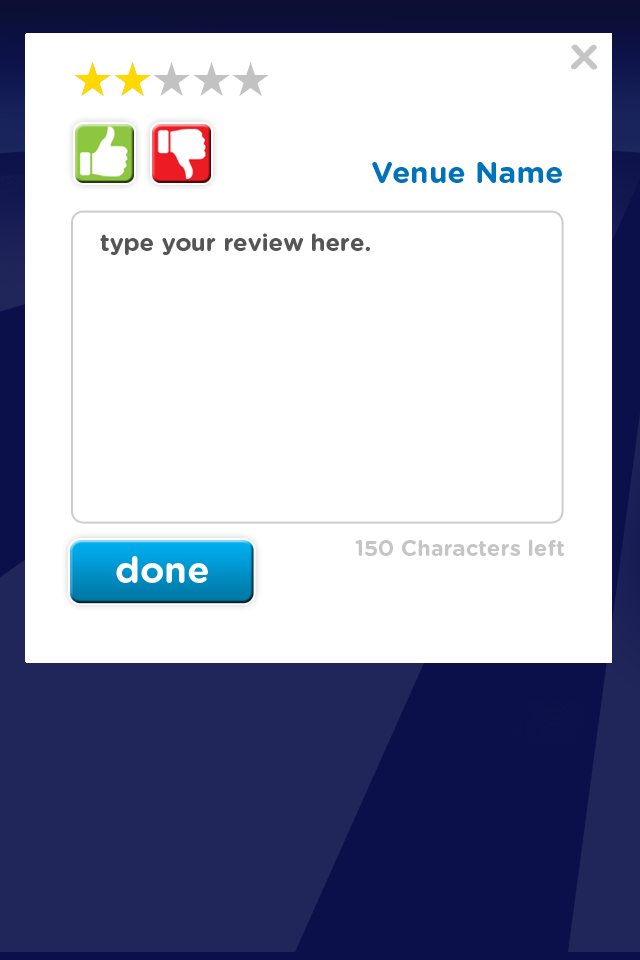
<style>
.page{position:relative;width:640px;height:960px;background:#ffffff}
.page>*{position:absolute;margin:0}
.t1{font:34.6px "GothamRounded-Bold";color:#c5c5c5;scale:1.23 1}
.t2{font:30px "GothamRounded-Bold";color:#0072bc}
.t3{font:24px "GothamRounded-Bold";color:#555555}
.t4{font:22.1px "GothamRounded-Bold";color:#c5c5c5}
.t5{font:36.9px "GothamRounded-Bold";color:#ffffff}
</style>
<div class="page">
<p class="t1" style="left:571px;top:44px;width:27px;height:26px">X</p>
<p class="t2" style="left:372px;top:162px;width:190px;height:21px">Venue Name</p>
<p class="t3" style="left:100px;top:233px;width:270px;height:22px">type your review here.</p>
<p class="t4" style="left:355px;top:539px;width:210px;height:17px">150 Characters left</p>
<p class="t5" style="left:116px;top:556px;width:92px;height:27px">done</p>
</div>
